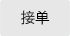
<style>
.page{position:relative;width:70px;height:36px;background:#e7e7e7}
.page>*{position:absolute;margin:0}
.t1{font:15px "STXihei";letter-spacing:-0.045em;color:#000000}
</style>
<div class="page">
<p class="t1" style="left:21px;top:10px;width:29px;height:15px">接单</p>
</div>
